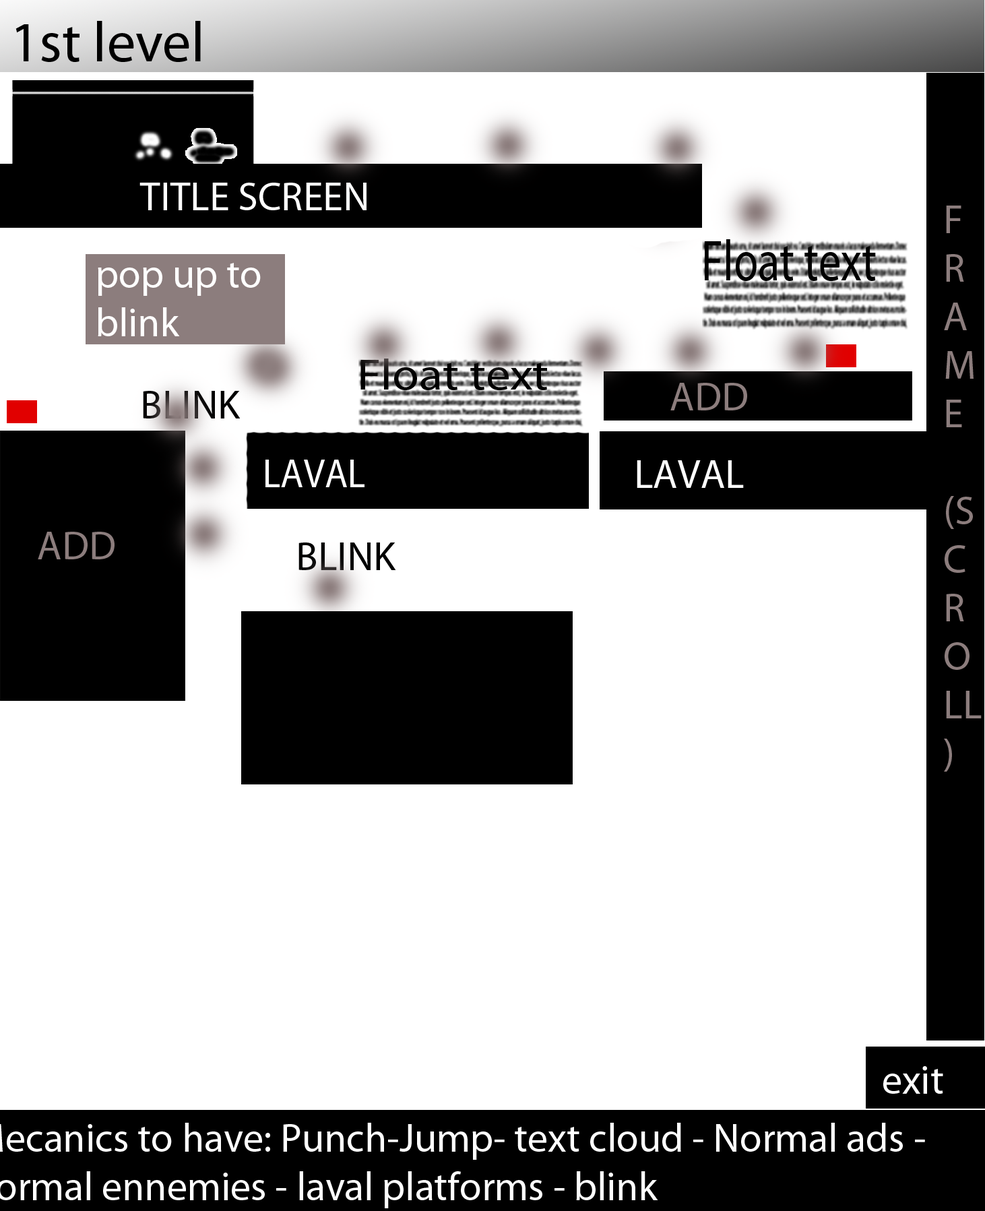
<style>
.page{position:relative;width:985px;height:1211px;background:#ffffff}
.page>*{position:absolute;margin:0}
.t1{font:57.4px "MyriadPro-Regular";color:#000000}
.t2{font:40.4px "MyriadPro-Regular";color:#ffffff}
.t3{font:40.4px "MyriadPro-Regular";color:#8c7d7d}
.t4{font:57.5px "MyriadPro-Regular";color:#000000;scale:0.78 1}
.t5{font:44px "MyriadPro-Regular";color:#000000;scale:1.11 1}
.t6{font:40.4px "MyriadPro-Regular";color:#000000}
.t7{font:40.4px "MyriadPro-Regular";color:#ffffff;scale:0.93 1}
</style>
<div class="page">
<p class="t1" style="left:15px;top:21px;width:186px;height:41px">1st level</p>
<p class="t2" style="left:139px;top:183px;width:227px;height:27px">TITLE SCREEN</p>
<p class="t3" style="left:944px;top:205px;width:38px;height:566px">F<br>R<br>A<br>M<br>E<br><br>(SCROLL)</p>
<p class="t4" style="left:705px;top:239px;width:171px;height:42px">Float text</p>
<p class="t2" style="left:98px;top:263px;width:163px;height:73px">pop up to blink</p>
<p class="t5" style="left:360px;top:358px;width:187px;height:32px">Float text</p>
<p class="t3" style="left:670px;top:383px;width:77px;height:27px">ADD</p>
<p class="t6" style="left:143px;top:391px;width:98px;height:27px">BLINK</p>
<p class="t7" style="left:265px;top:459px;width:99px;height:28px">LAVAL</p>
<p class="t2" style="left:637px;top:460px;width:107px;height:28px">LAVAL</p>
<p class="t3" style="left:38px;top:532px;width:77px;height:27px">ADD</p>
<p class="t6" style="left:298px;top:542px;width:98px;height:28px">BLINK</p>
<p class="t2" style="left:883px;top:1066px;width:60px;height:27px">exit</p>
<p class="t2" style="left:0px;top:1122px;width:925px;height:86px">Mecanics to have: Punch-Jump- text cloud - Normal ads - normal ennemies - laval platforms - blink<br><br>f<br>-</p>
</div>
